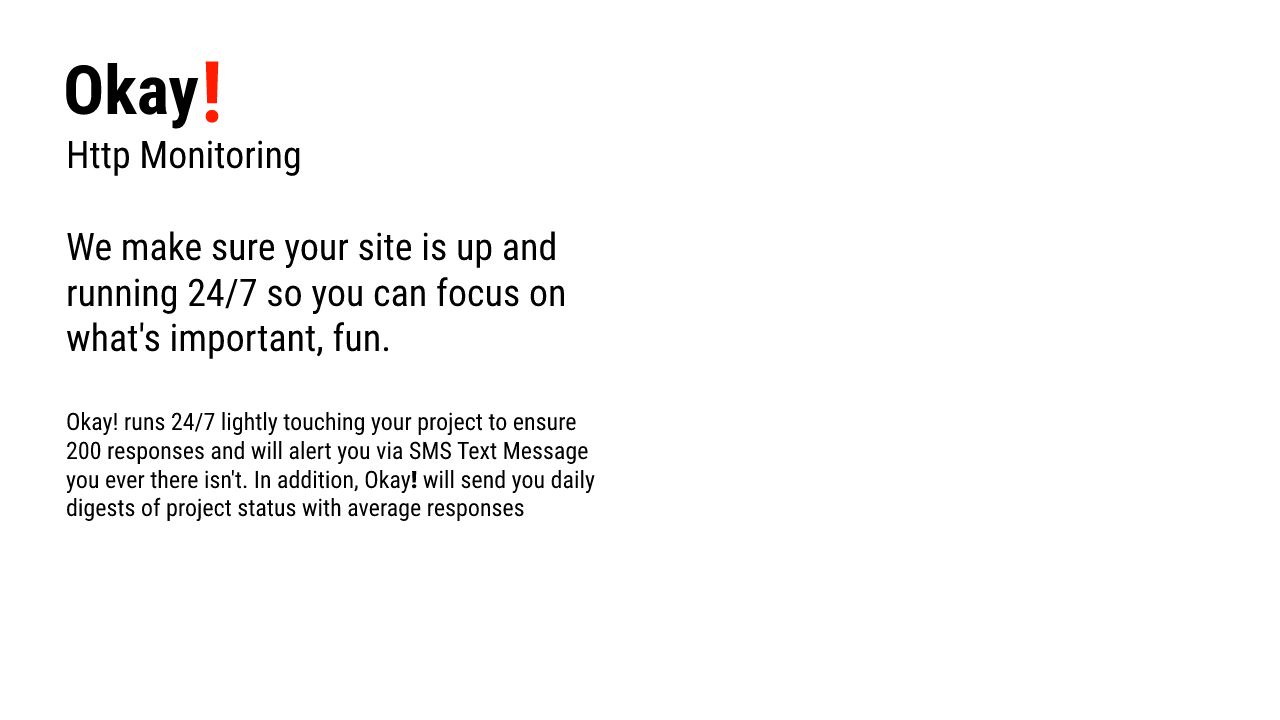
<style>
.page{position:relative;width:1280px;height:720px;background:#ffffff}
.page>*{position:absolute;margin:0}
.t1{font:68.1px "RobotoCondensed-Bold";color:#000000}
.t2{font:85.2px "RobotoCondensed-Bold";color:#ff1c00}
.t3{font:38px "RobotoCondensed-Regular";color:#000000}
.t4{font:24px "RobotoCondensed-Regular";color:#000000}
.t5{font:24px "Roboto-Black";color:#000000}
</style>
<div class="page">
<p class="t1" style="left:66px;top:62px;width:133px;height:67px">Okay</p>
<p class="t2" style="left:205px;top:61px;width:14px;height:62px">!</p>
<p class="t3" style="left:68px;top:140px;width:232px;height:36px">Http Monitoring</p>
<p class="t3" style="left:66px;top:231px;width:498px;height:128px">We make sure your site is up and running 24/7 so you can focus on what's important, fun.</p>
<p class="t4" style="left:66px;top:412px;width:529px;height:110px">Okay! runs 24/7 lightly touching your project to ensure 200 responses and will alert you via SMS Text Message you ever there isn't. In addition, Okay<span class="t5">!</span> will send you daily digests of project status with average responses</p>
</div>
